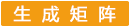
<style>
.page{position:relative;width:130px;height:27px;background:#f39c12}
.page>*{position:absolute;margin:0}
.t1{font:17px "MicrosoftYaHei";letter-spacing:0.64em;color:#ffffff;font-weight:bold}
</style>
<div class="page">
<p class="t1" style="left:13px;top:5px;width:103px;height:18px">生成矩阵</p>
</div>
